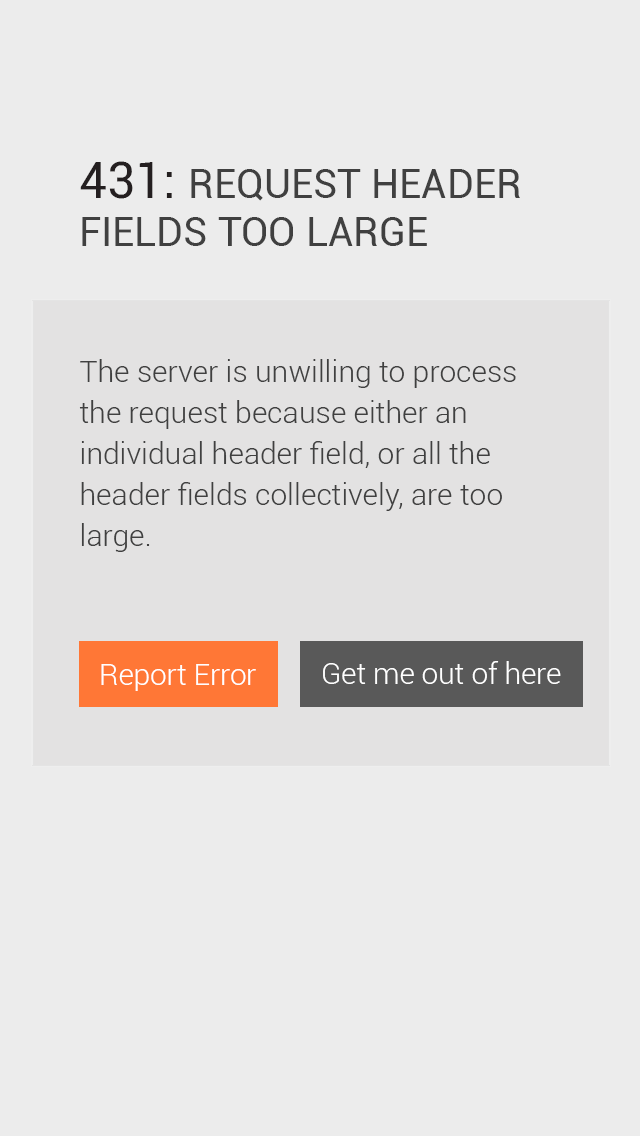
<style>
.page{position:relative;width:640px;height:1136px;background:#ececec}
.page>*{position:absolute;margin:0}
.t1{font:40px "Roboto-Regular";color:#404040;text-transform:uppercase}
.t2{font:50px "Roboto-Regular";color:#404040;text-transform:uppercase}
.t3{font:50px "Roboto-Regular";color:#241f20;text-transform:uppercase}
.t4{font:30px/41px "Roboto-Light";color:#404040}
.t5{font:29.7px "Roboto-Light";color:#ffffff}
</style>
<div class="page">
<p class="t1" style="left:80px;top:161px;width:440px;height:85px"><span class="t2">431: </span>Request Header Fields Too Large</p>
<p class="t1" style="left:80px;top:161px;width:440px;height:85px"><span class="t3">431: </span>Request Header Fields Too Large</p>
<p class="t4" style="left:79px;top:359px;width:437px;height:193px">The server is unwilling to process the request because either an individual header field, or all the header fields collectively, are too large.</p>
<p class="t4" style="left:79px;top:359px;width:437px;height:193px">The server is unwilling to process the request because either an individual header field, or all the header fields collectively, are too large.</p>
<p class="t5" style="left:101px;top:664px;width:155px;height:27px">Report Error</p>
<p class="t5" style="left:101px;top:664px;width:155px;height:27px">Report Error</p>
<p class="t5" style="left:323px;top:661px;width:238px;height:23px">Get me out of here</p>
<p class="t5" style="left:323px;top:661px;width:238px;height:23px">Get me out of here</p>
</div>
